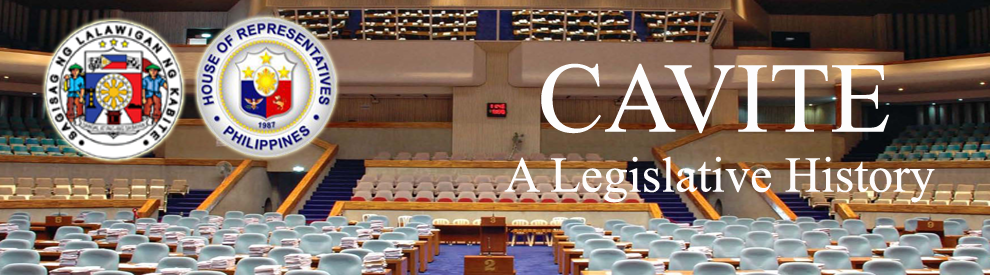
<style>
.page{position:relative;width:990px;height:275px}
.page>*{position:absolute;margin:0}
.t1{font:50px "TimesNewRomanPSMT";color:#fdfcfc}
.t2{font:100px "TimesNewRomanPSMT";color:#fdfdfd}
</style>
<div class="page">
<p class="t1" style="left:504px;top:63px;width:431px;height:140px;text-align:center"><span class="t2">CAVITE<br></span>A Legislative History</p>
</div>
